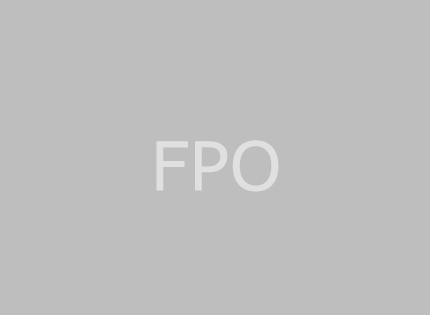
<style>
.page{position:relative;width:430px;height:315px;background:#bebebe}
.page>*{position:absolute;margin:0}
.t1{font:67.2px "Verdana";color:#e0e0e0}
</style>
<div class="page">
<p class="t1" style="left:156px;top:140px;width:123px;height:52px">FPO</p>
</div>
